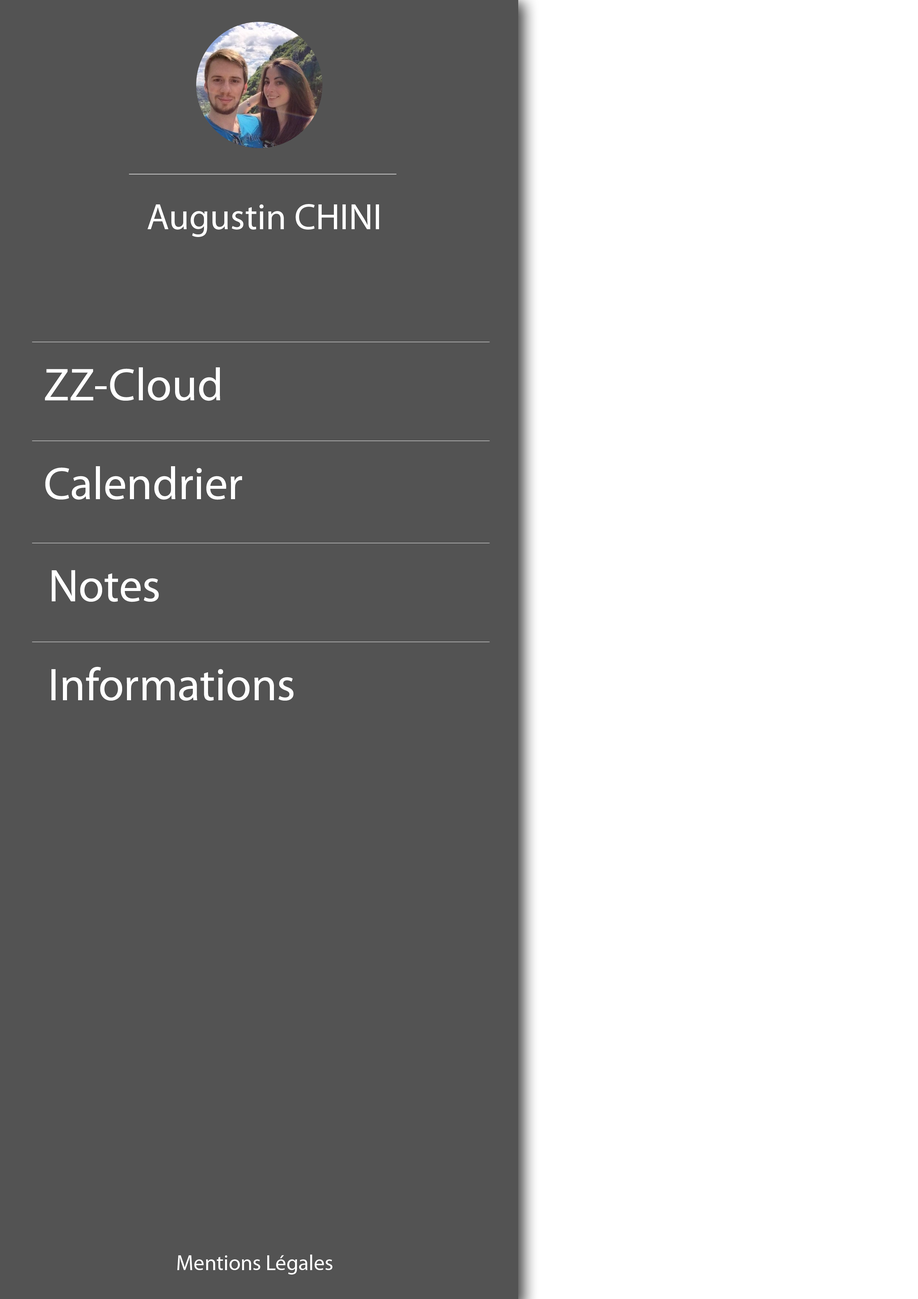
<style>
.page{position:relative;width:918px;height:1299px;background:#535353}
.page>*{position:absolute;margin:0}
.t1{font:37px "MyriadPro-Regular";color:#ffffff}
.t2{font:46.3px "MyriadPro-Regular";color:#ffffff}
.t3{font:21.6px "MyriadPro-Regular";color:#ffffff}
</style>
<div class="page">
<p class="t1" style="left:147px;top:204px;width:232px;height:33px">Augustin CHINI</p>
<p class="t2" style="left:45px;top:367px;width:175px;height:34px">ZZ-Cloud</p>
<p class="t2" style="left:45px;top:466px;width:197px;height:34px">Calendrier</p>
<p class="t2" style="left:51px;top:570px;width:108px;height:32px">Notes</p>
<p class="t2" style="left:51px;top:666px;width:243px;height:35px">Informations</p>
<p class="t3" style="left:177px;top:1254px;width:155px;height:20px">Mentions Légales</p>
</div>
